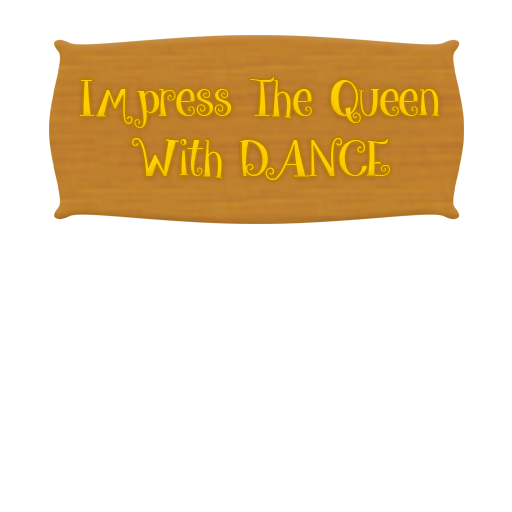
<style>
.page{position:relative;width:512px;height:512px;background:#ffffff}
.page>*{position:absolute;margin:0}
.t1{font:50px "give_me_some_sugar";color:#ffcc00}
</style>
<div class="page">
<p class="t1" style="left:79px;top:77px;width:360px;height:103px">Impress The Queen<br>   With DANCE</p>
</div>
